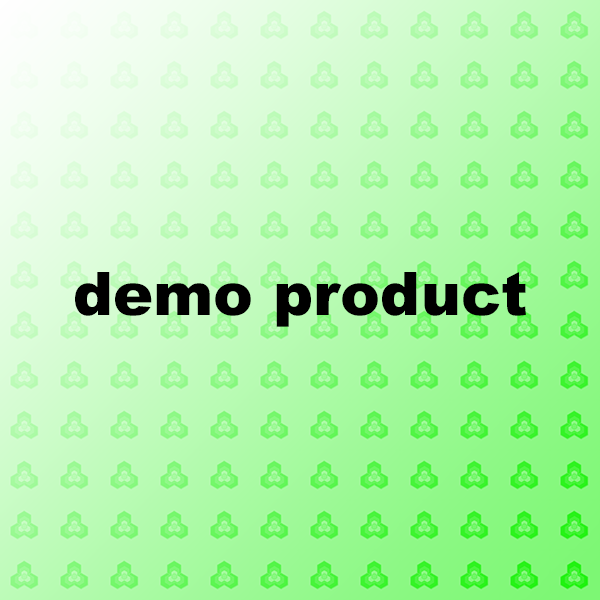
<style>
.page{position:relative;width:600px;height:600px}
.page>*{position:absolute;margin:0}
.t1{font:60px "Arial-Black";color:#000000}
</style>
<div class="page">
<p class="t1" style="left:75px;top:272px;width:451px;height:55px">demo product</p>
</div>
